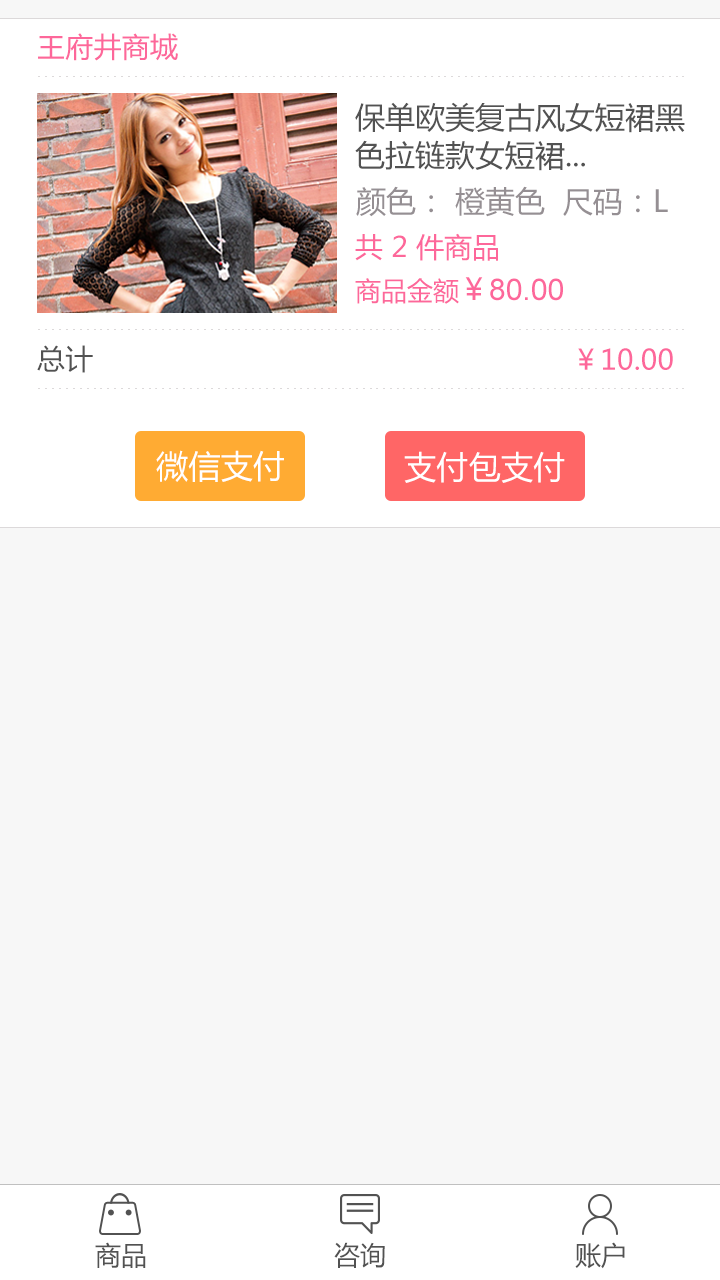
<style>
.page{position:relative;width:720px;height:1280px;background:#f7f7f7}
.page>*{position:absolute;margin:0}
.t1{font:28px "MicrosoftYaHei";letter-spacing:0.01em;color:#fd679a}
.t2{font:30px/38px "MicrosoftYaHei";color:#525252}
.t3{font:30px "MicrosoftYaHei";color:#958f93}
.t4{font:28px "MicrosoftYaHei";color:#fd679a}
.t5{font:30px "ArialMT";color:#fd679a}
.t6{font:26px "MicrosoftYaHei";color:#fd679a}
.t7{font:30px "MicrosoftYaHei";color:#fd679a}
.t8{font:28px "MicrosoftYaHei";letter-spacing:0.01em;color:#525252}
.t9{font:32px "MicrosoftYaHei";letter-spacing:0.01em;color:#ffffff}
.t10{font:26px "MicrosoftYaHei";color:#525252}
</style>
<div class="page">
<p class="t1" style="left:38px;top:33px;width:140px;height:28px">王府井商城</p>
<p class="t2" style="left:355px;top:102px;width:330px;height:69px">保单欧美复古风女短裙黑<br>色拉链款女短裙...</p>
<p class="t3" style="left:356px;top:186px;width:312px;height:31px">颜色： 橙黄色  尺码：L</p>
<p class="t4" style="left:355px;top:233px;width:143px;height:28px">共 2 件商品</p>
<p class="t5" style="left:355px;top:277px;width:208px;height:27px"><span class="t6">商品金额</span><span class="t7">￥</span>80.00</p>
<p class="t8" style="left:37px;top:345px;width:56px;height:28px">总计</p>
<p class="t1" style="left:578px;top:348px;width:95px;height:22px">￥10.00</p>
<p class="t9" style="left:156px;top:450px;width:128px;height:32px">微信支付</p>
<p class="t9" style="left:404px;top:451px;width:161px;height:32px">支付包支付</p>
<p class="t10" style="left:95px;top:1242px;width:51px;height:26px">商品</p>
<p class="t10" style="left:334px;top:1242px;width:51px;height:26px">咨询</p>
<p class="t10" style="left:575px;top:1242px;width:50px;height:27px">账户</p>
</div>
